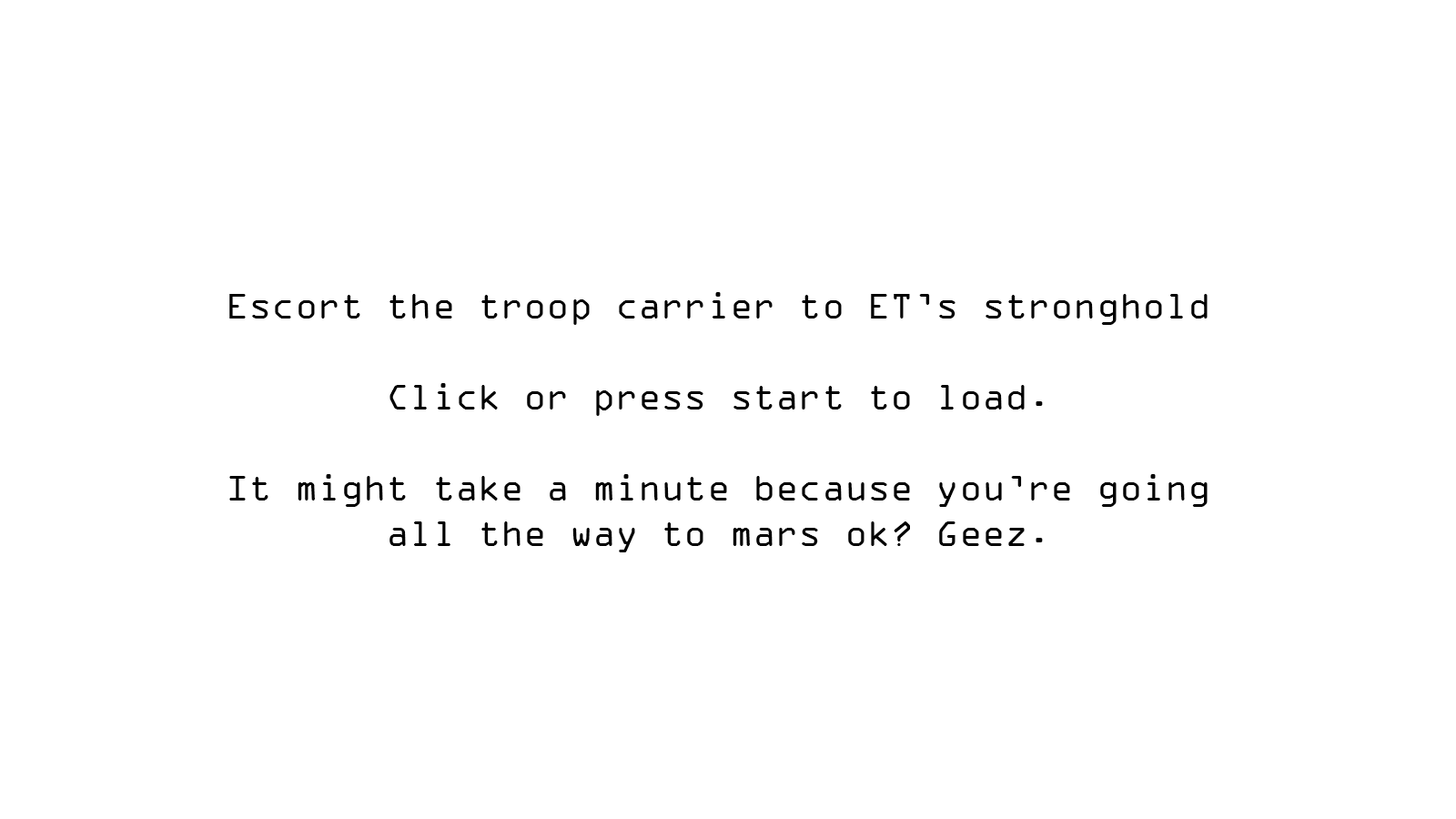
<style>
.page{position:relative;width:1456px;height:819px;background:#ffffff}
.page>*{position:absolute;margin:0}
.t1{font:37.9px "OCRAExtended";color:#000000}
</style>
<div class="page">
<p class="t1" style="left:229px;top:292px;width:979px;height:260px;text-align:center">Escort the troop carrier to ET’s stronghold<br><br>Click or press start to load.<br><br>It might take a minute because you’re going all the way to mars ok? Geez.</p>
</div>
